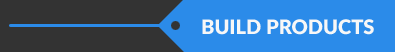
<style>
.page{position:relative;width:395px;height:52px;background:#2b8be9}
.page>*{position:absolute;margin:0}
.t1{font:20px "Lato-Black";color:#f7f7f7}
</style>
<div class="page">
<p class="t1" style="left:202px;top:19px;width:172px;height:16px">BUILD PRODUCTS</p>
</div>
